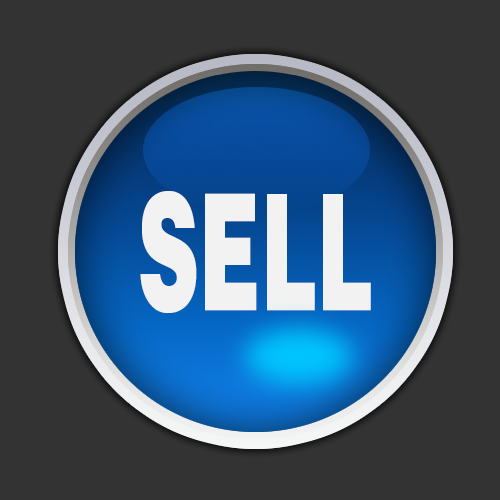
<style>
.page{position:relative;width:500px;height:500px;background:#333333}
.page>*{position:absolute;margin:0}
.t1{font:161.5px "Helvetica-Black";color:#f2f2f2;scale:0.53 1}
</style>
<div class="page">
<p class="t1" style="left:140px;top:191px;width:231px;height:123px">SELL</p>
</div>
